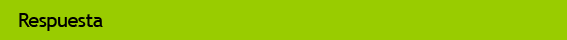
<style>
.page{position:relative;width:567px;height:40px;background:#99cc00}
.page>*{position:absolute;margin:0}
.t1{font:20px "TrebuchetMS";letter-spacing:-0.025em;color:#000000}
</style>
<div class="page">
<p class="t1" style="left:19px;top:13px;width:84px;height:18px">Respuesta</p>
</div>
